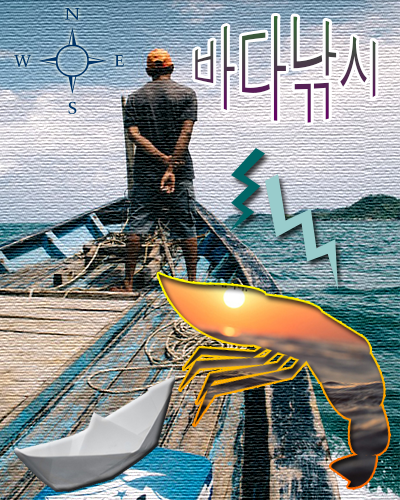
<style>
.page{position:relative;width:400px;height:500px}
.page>*{position:absolute;margin:0}
.t1{font:47.9px "Dotum"}
</style>
<div class="page">
<p class="t1" style="left:195px;top:16px;width:181px;height:107px">바다낚시</p>
</div>
